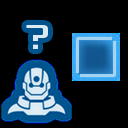
<style>
.page{position:relative;width:128px;height:128px;background:#000000}
.page>*{position:absolute;margin:0}
.t1{font:36px "Xolonium-GPL";color:#daeaf2}
</style>
<div class="page">
<p class="t1" style="left:26px;top:25px;width:22px;height:24px">?</p>
</div>
